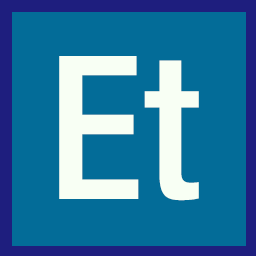
<style>
.page{position:relative;width:256px;height:256px;background:#036c98}
.page>*{position:absolute;margin:0}
.t1{font:200px "HelveticaNeueLTStd-MdCn";color:#f8fff4}
</style>
<div class="page">
<p class="t1" style="left:59px;top:56px;width:140px;height:145px">Et</p>
</div>
